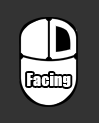
<style>
.page{position:relative;width:99px;height:123px;background:#333333}
.page>*{position:absolute;margin:0}
.t1{font:16.4px "Impact";color:#ffffff}
</style>
<div class="page">
<p class="t1" style="left:27px;top:73px;width:44px;height:14px">Facing</p>
</div>
